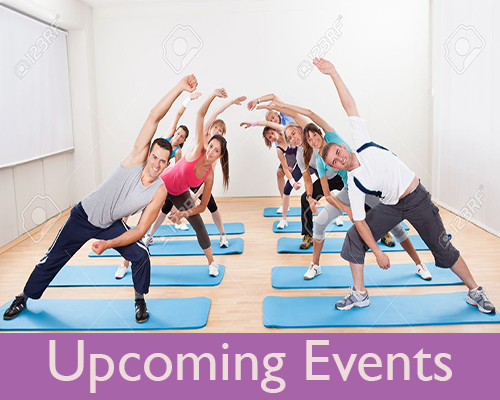
<style>
.page{position:relative;width:500px;height:400px}
.page>*{position:absolute;margin:0}
.t1{font:58.3px "GillSansMT";color:#eedbdc}
</style>
<div class="page">
<p class="t1" style="left:49px;top:340px;width:403px;height:53px">Upcoming Events</p>
</div>
